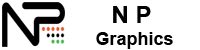
<style>
.page{position:relative;width:200px;height:50px;background:#ffffff}
.page>*{position:absolute;margin:0}
.t1{font:18px "Arial-BoldMT";color:#000000}
.t2{font:24px "Arial-BoldMT";color:#000000}
</style>
<div class="page">
<p class="t1" style="left:96px;top:6px;width:77px;height:43px;text-align:center"><span class="t2">N P <br></span>Graphics</p>
</div>
